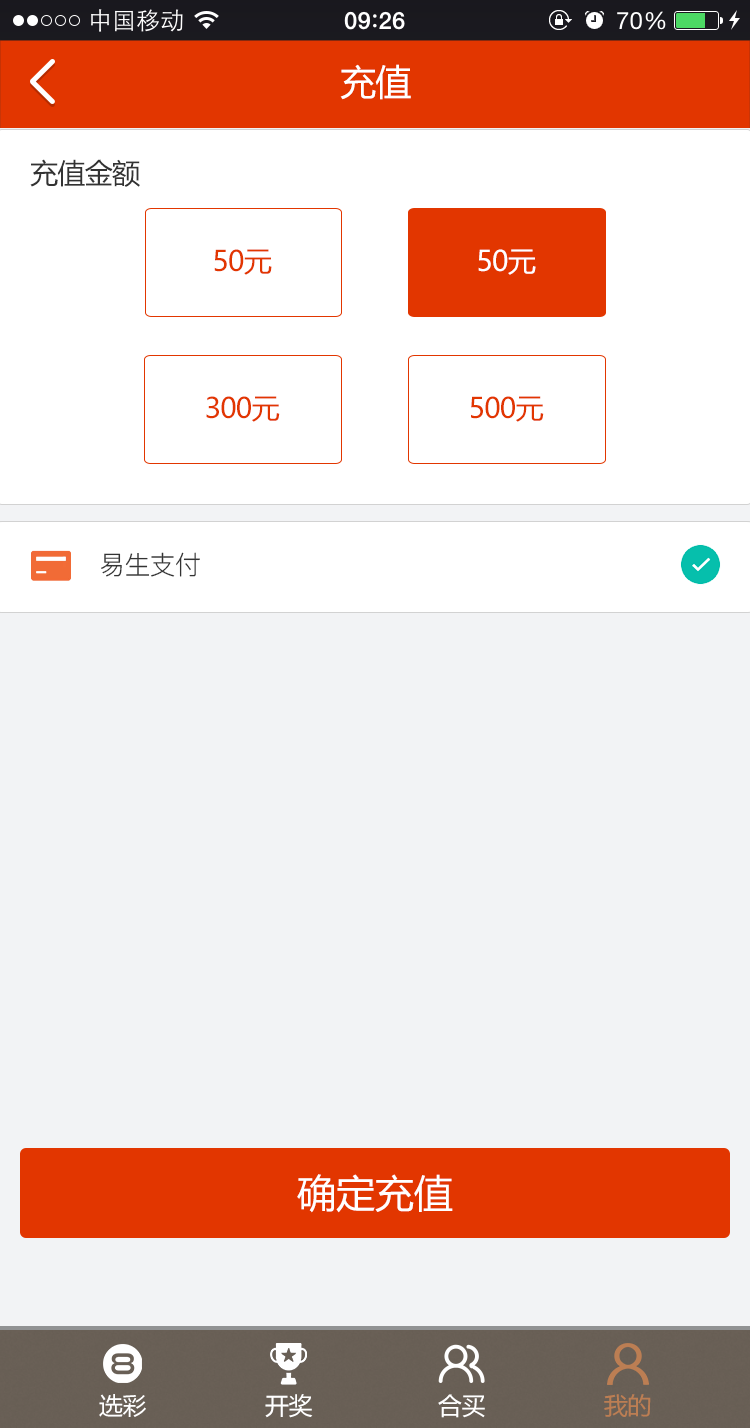
<style>
.page{position:relative;width:750px;height:1428px;background:#f2f3f5}
.page>*{position:absolute;margin:0}
.t1{font:36px "MicrosoftYaHei";letter-spacing:-0.025em;color:#ffffff}
.t2{font:28px "MicrosoftYaHei";letter-spacing:-0.025em;color:#333333}
.t3{font:28px "MicrosoftYaHei";letter-spacing:-0.025em;color:#e23600}
.t4{font:28px "MicrosoftYaHei";letter-spacing:-0.025em;color:#ffffff}
.t5{font:26px "PingFang-SC-Regular";letter-spacing:-0.025em;color:#333333}
.t6{font:39px "MicrosoftYaHei";color:#ffffff}
.t7{font:24px "MicrosoftYaHei";letter-spacing:-0.025em;color:#ffffff}
.t8{font:24px "MicrosoftYaHei";letter-spacing:-0.025em;color:#bc7e53}
</style>
<div class="page">
<p class="t1" style="left:340px;top:64px;width:71px;height:36px">充值</p>
<p class="t2" style="left:30px;top:159px;width:110px;height:28px">充值金额</p>
<p class="t3" style="left:214px;top:249px;width:58px;height:26px">50元</p>
<p class="t4" style="left:478px;top:249px;width:58px;height:26px">50元</p>
<p class="t3" style="left:206px;top:396px;width:74px;height:26px">300元</p>
<p class="t3" style="left:471px;top:396px;width:73px;height:26px">500元</p>
<p class="t5" style="left:101px;top:552px;width:99px;height:25px">易生支付</p>
<p class="t6" style="left:297px;top:1174px;width:156px;height:39px">确定充值</p>
<p class="t7" style="left:99px;top:1394px;width:47px;height:23px">选彩</p>
<p class="t7" style="left:265px;top:1394px;width:48px;height:24px">开奖</p>
<p class="t7" style="left:438px;top:1394px;width:47px;height:24px">合买</p>
<p class="t8" style="left:604px;top:1394px;width:47px;height:23px">我的</p>
</div>
